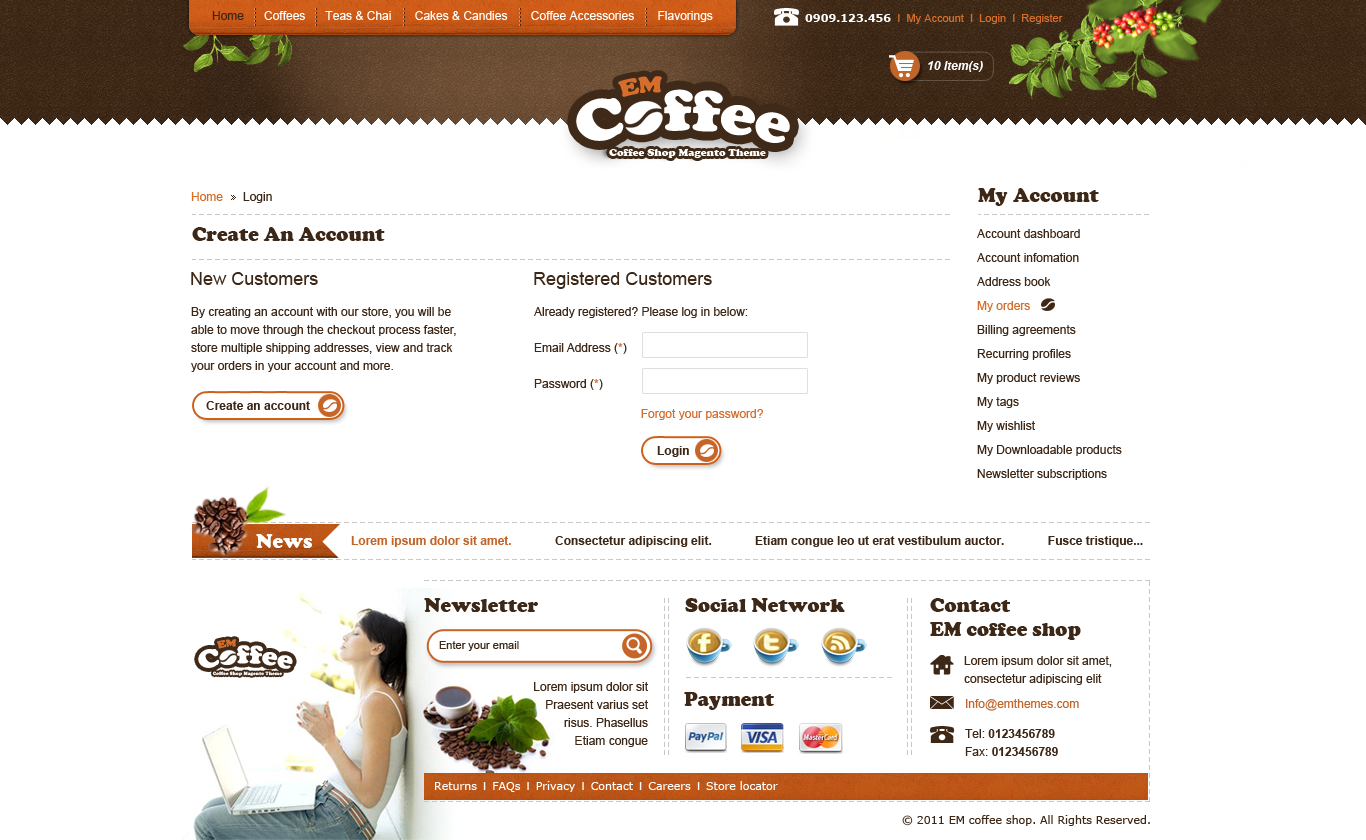
<style>
.page{position:relative;width:1366px;height:840px;background:#ffffff}
.page>*{position:absolute;margin:0}
.t1{font:12px "ArialMT";color:#fefefe}
.t2{font:12px "ArialMT";color:#3d2817}
.t3{font:11px "ArialMT";color:#d56d2b}
.t4{font:11px "Verdana-Bold";color:#ffffff}
.t5{font:12px "Arial-BoldItalicMT";color:#ffffff}
.t6{font:12px "ArialMT";color:#d56d2b}
.t7{font:20px "CooperBlack";color:#3d2817}
.t8{font:12px/24px "ArialMT";color:#3d2817}
.t9{font:12px/24px "ArialMT";color:#d56d2b}
.t10{font:18px "ArialMT";color:#3d2817}
.t11{font:12px/18px "ArialMT";color:#3d2817}
.t12{font:12px/36px "ArialMT";color:#3d2817}
.t13{font:12px/36px "ArialMT";color:#d56d2b}
.t14{font:12px/30px "ArialMT";color:#d56d2b}
.t15{font:12px "Arial-BoldMT";color:#3d2817}
.t16{font:20px "CooperBlack";color:#ffffff}
.t17{font:12px "Arial-BoldMT";color:#c26529}
.t18{font:20px/24px "CooperBlack";color:#3d2817}
.t19{font:11px "ArialMT";color:#3d2817}
.t20{font:12px/30px "ArialMT";color:#c26529}
.t21{font:12px/30px "ArialMT";color:#3d2817}
.t22{font:12px/30px "Arial-BoldMT";color:#3d2817}
.t23{font:12px/18px "Arial-BoldMT";color:#3d2817}
.t24{font:11px "Verdana";color:#ffffff}
.t25{font:11px "ArialMT";color:#ffffff}
.t26{font:11px "Verdana";color:#3d2817}
</style>
<div class="page">
<p class="t1" style="left:212px;top:11px;width:501px;height:11px"><span class="t2">Home</span>      Coffees      Teas &amp; Chai       Cakes &amp; Candies       Coffee Accessories       Flavorings</p>
<p class="t3" style="left:805px;top:14px;width:258px;height:10px"><span class="t4">0909.123.456</span>  I  My Account  I  Login  I  Register</p>
<p class="t5" style="left:928px;top:61px;width:55px;height:11px">10 Item(s)</p>
<p class="t2" style="left:191px;top:192px;width:81px;height:11px"><span class="t6">Home</span>      Login</p>
<p class="t7" style="left:978px;top:188px;width:121px;height:18px">My Account</p>
<p class="t7" style="left:192px;top:227px;width:193px;height:14px">Create An Account</p>
<p class="t8" style="left:977px;top:229px;width:145px;height:251px">Account dashboard<br>Account infomation<br>Address book<br><span class="t9">My orders<br></span>Billing agreements<br>Recurring profiles<br>My product reviews<br>My tags<br>My wishlist<br>My Downloadable products<br>Newsletter subscriptions</p>
<p class="t10" style="left:191px;top:272px;width:127px;height:13px">New Customers</p>
<p class="t10" style="left:534px;top:272px;width:178px;height:17px">Registered Customers</p>
<p class="t11" style="left:191px;top:307px;width:265px;height:65px">By creating an account with our store, you will be <br>able to move through the checkout process faster, <br>store multiple shipping addresses, view and track<br>your orders in your account and more.</p>
<p class="t11" style="left:534px;top:307px;width:229px;height:113px">Already registered? Please log in below:<br><span class="t12">Email Address (</span><span class="t13">*</span><span class="t12">)<br>Password (</span><span class="t13">*</span><span class="t12">)<br>                                </span><span class="t14">Forgot your password?</span></p>
<p class="t15" style="left:206px;top:401px;width:104px;height:9px">Create an account</p>
<p class="t15" style="left:657px;top:446px;width:32px;height:11px">Login</p>
<p class="t16" style="left:256px;top:534px;width:56px;height:14px">News</p>
<p class="t15" style="left:351px;top:536px;width:792px;height:11px"><span class="t17">Lorem ipsum dolor sit amet.</span>             Consectetur adipiscing elit.             Etiam congue leo ut erat vestibulum auctor.             Fusce tristique...</p>
<p class="t7" style="left:424px;top:598px;width:114px;height:14px">Newsletter</p>
<p class="t7" style="left:685px;top:598px;width:160px;height:14px">Social Network</p>
<p class="t18" style="left:930px;top:598px;width:151px;height:42px">Contact<br>EM coffee shop</p>
<p class="t19" style="left:439px;top:641px;width:80px;height:10px">Enter your email</p>
<p class="t11" style="left:964px;top:656px;width:148px;height:29px">Lorem ipsum dolor sit amet, <br>consectetur adipiscing elit</p>
<p class="t11" style="left:534px;top:682px;width:114px;height:65px;text-align:right">Lorem ipsum dolor sit<br>Praesent varius set<br>risus. Phasellus<br>Etiam congue</p>
<p class="t7" style="left:684px;top:692px;width:90px;height:18px">Payment</p>
<p class="t20" style="left:965px;top:699px;width:114px;height:57px">Info@emthemes.com<br><span class="t21">Tel: </span><span class="t22">0123456789<br></span><span class="t11">Fax: </span><span class="t23">0123456789</span></p>
<p class="t24" style="left:435px;top:781px;width:343px;height:11px">Returns<span class="t25">  I  </span>FAQs<span class="t25">  I  </span>Privacy<span class="t25">  I  </span>Contact<span class="t25">  I  </span>Careers<span class="t25">  I  </span>Store locator</p>
<p class="t26" style="left:902px;top:815px;width:248px;height:11px">© 2011 EM coffee shop. All Rights Reserved.</p>
</div>
